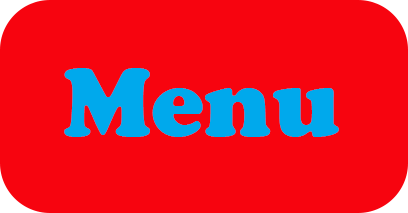
<style>
.page{position:relative;width:408px;height:213px;background:#f7040f}
.page>*{position:absolute;margin:0}
.t1{font:100px "CooperBlack";color:#00a9ec}
</style>
<div class="page">
<p class="t1" style="left:64px;top:68px;width:275px;height:69px">Menu</p>
</div>
